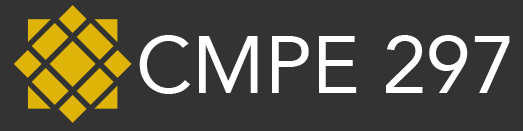
<style>
.page{position:relative;width:523px;height:131px;background:#333333}
.page>*{position:absolute;margin:0}
.t1{font:80px "Avenir-Roman";color:#ffffff}
</style>
<div class="page">
<p class="t1" style="left:139px;top:35px;width:371px;height:59px">CMPE 297</p>
</div>
